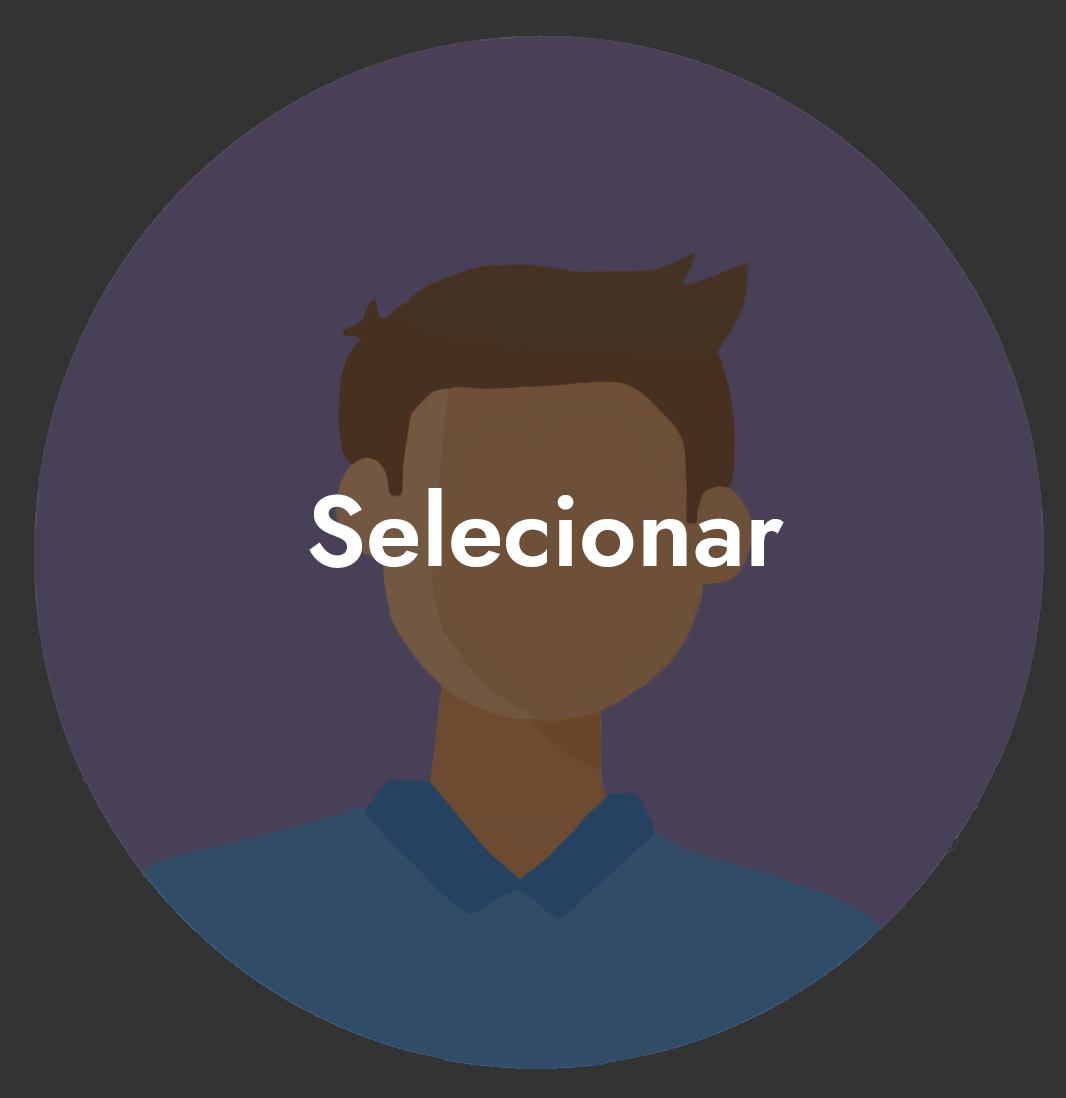
<style>
.page{position:relative;width:1066px;height:1098px;background:#484057}
.page>*{position:absolute;margin:0}
.t1{font:100px "Jost-SemiBold";color:#ffffff}
</style>
<div class="page">
<p class="t1" style="left:309px;top:488px;width:475px;height:80px">Selecionar</p>
</div>
